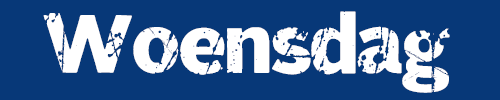
<style>
.page{position:relative;width:500px;height:100px;background:#073878}
.page>*{position:absolute;margin:0}
.t1{font:55px "321Perfect";color:#ffffff}
</style>
<div class="page">
<p class="t1" style="left:43px;top:11px;width:407px;height:82px">Woensdag</p>
</div>
